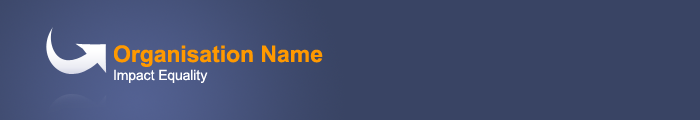
<style>
.page{position:relative;width:700px;height:120px;background:#394464}
.page>*{position:absolute;margin:0}
.t1{font:23px "Arial-BoldMT";color:#ff9900}
.t2{font:14px "ArialMT";color:#ffffff}
</style>
<div class="page">
<p class="t1" style="left:114px;top:45px;width:209px;height:22px">Organisation Name</p>
<p class="t2" style="left:114px;top:69px;width:94px;height:14px">Impact Equality</p>
</div>
